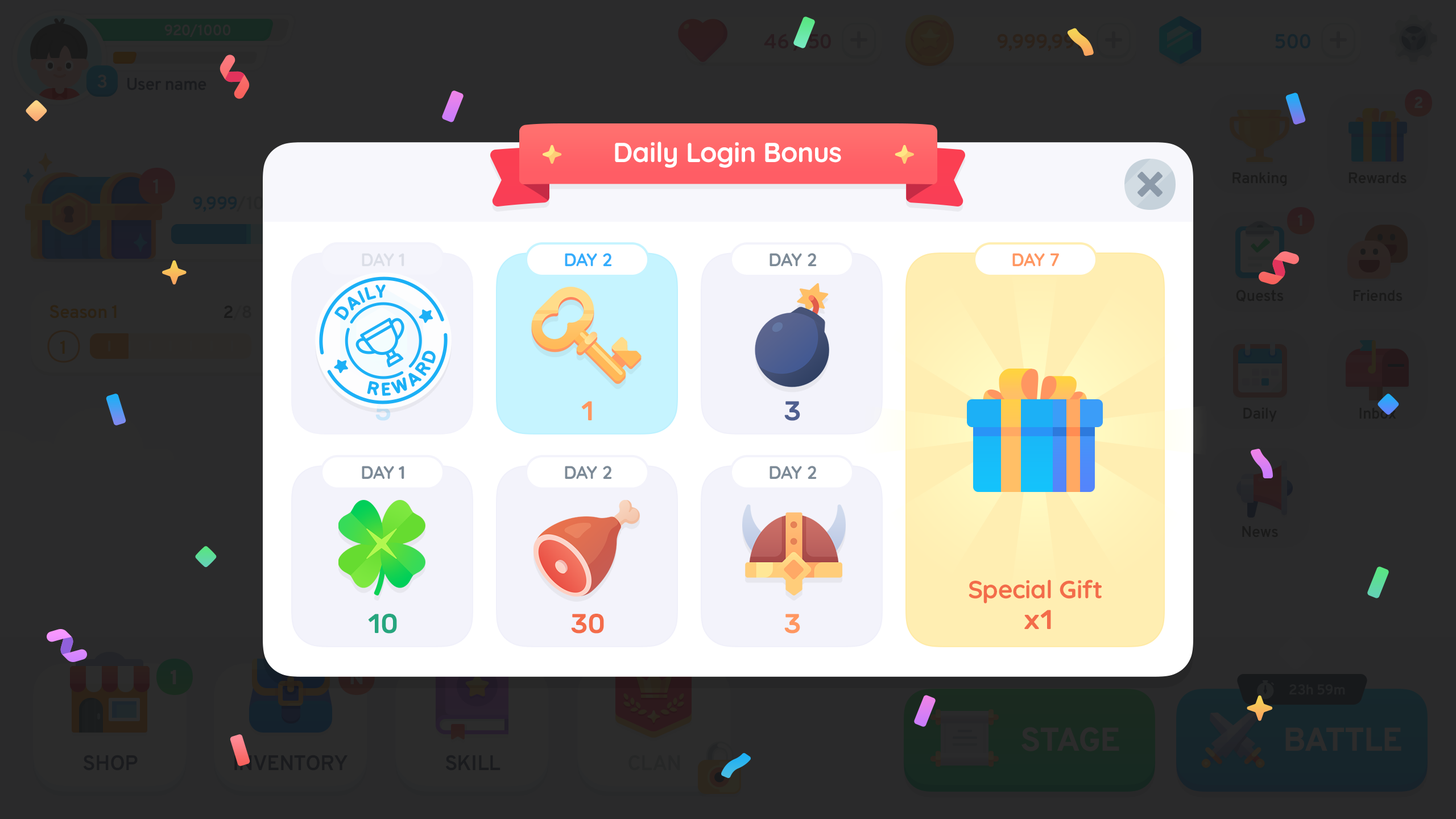
<style>
.page{position:relative;width:1456px;height:819px;background:#2b2b2c}
.page>*{position:absolute;margin:0}
.t1{font:27.3px "Quicksand-Bold";letter-spacing:-0.01em;color:#ffffff}
.t2{font:18.2px "Quicksand-Bold";letter-spacing:-0.01em;color:#dbdee7;text-transform:uppercase}
.t3{font:18.2px "Quicksand-Bold";letter-spacing:-0.01em;color:#34adfc;text-transform:uppercase}
.t4{font:18.2px "Quicksand-Bold";letter-spacing:-0.01em;color:#7c8a97;text-transform:uppercase}
.t5{font:18.2px "Quicksand-Bold";letter-spacing:-0.01em;color:#ff9761;text-transform:uppercase}
.t6{font:16.7px "BPreplay-Bold";letter-spacing:0.05em;color:#1cb0f6;text-transform:uppercase;scale:1.09 1}
.t7{font:16.7px "BPreplay-Bold";letter-spacing:0.2em;color:#1cb0f6;text-transform:uppercase;scale:1.09 1}
.t8{font:27.3px "Rubik-Medium";letter-spacing:-0.01em}
.t9{font:27.3px "Rubik-Medium";letter-spacing:-0.01em;color:#ff9761}
.t10{font:27.3px "Rubik-Medium";letter-spacing:-0.01em;color:#4f5f90}
.t11{font:25px "Quicksand-Bold";letter-spacing:-0.01em;color:#f36c4a}
.t12{font:27.3px "Rubik-Medium";letter-spacing:-0.01em;color:#26a67e}
.t13{font:27.3px "Rubik-Medium";letter-spacing:-0.01em;color:#f36c4a}
</style>
<div class="page">
<p class="t1" style="left:615px;top:142px;width:226px;height:26px">Daily Login Bonus</p>
<p class="t2" style="left:362px;top:253px;width:42px;height:13px">Day 1</p>
<p class="t3" style="left:565px;top:253px;width:47px;height:13px">Day 2</p>
<p class="t4" style="left:770px;top:253px;width:47px;height:13px">Day 2</p>
<p class="t5" style="left:1012px;top:253px;width:47px;height:13px">Day 7</p>
<p class="t6" style="left:334px;top:284px;width:52px;height:36px;rotate:-30deg">Daily</p>
<p class="t7" style="left:367px;top:350px;width:69px;height:46px;rotate:-30deg">reward</p>
<p class="t8" style="left:375px;top:401px;width:16px;height:20px">5</p>
<p class="t9" style="left:581px;top:401px;width:11px;height:19px">1</p>
<p class="t10" style="left:784px;top:401px;width:16px;height:20px">3</p>
<p class="t4" style="left:362px;top:466px;width:42px;height:13px">Day 1</p>
<p class="t4" style="left:565px;top:466px;width:47px;height:13px">Day 2</p>
<p class="t4" style="left:770px;top:466px;width:47px;height:13px">Day 2</p>
<p class="t11" style="left:969px;top:580px;width:133px;height:23px">Special Gift</p>
<p class="t12" style="left:368px;top:614px;width:29px;height:20px">10</p>
<p class="t13" style="left:571px;top:614px;width:33px;height:20px">30</p>
<p class="t9" style="left:784px;top:614px;width:16px;height:20px">3</p>
<p class="t13" style="left:1024px;top:610px;width:27px;height:19px">x1</p>
</div>
